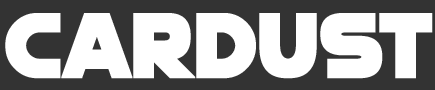
<style>
.page{position:relative;width:435px;height:90px;background:#333333}
.page>*{position:absolute;margin:0}
.t1{font:93.8px "Quicksilver";color:#ffffff;font-weight:bold}
</style>
<div class="page">
<p class="t1" style="left:5px;top:13px;width:428px;height:66px">CARDUST</p>
</div>
